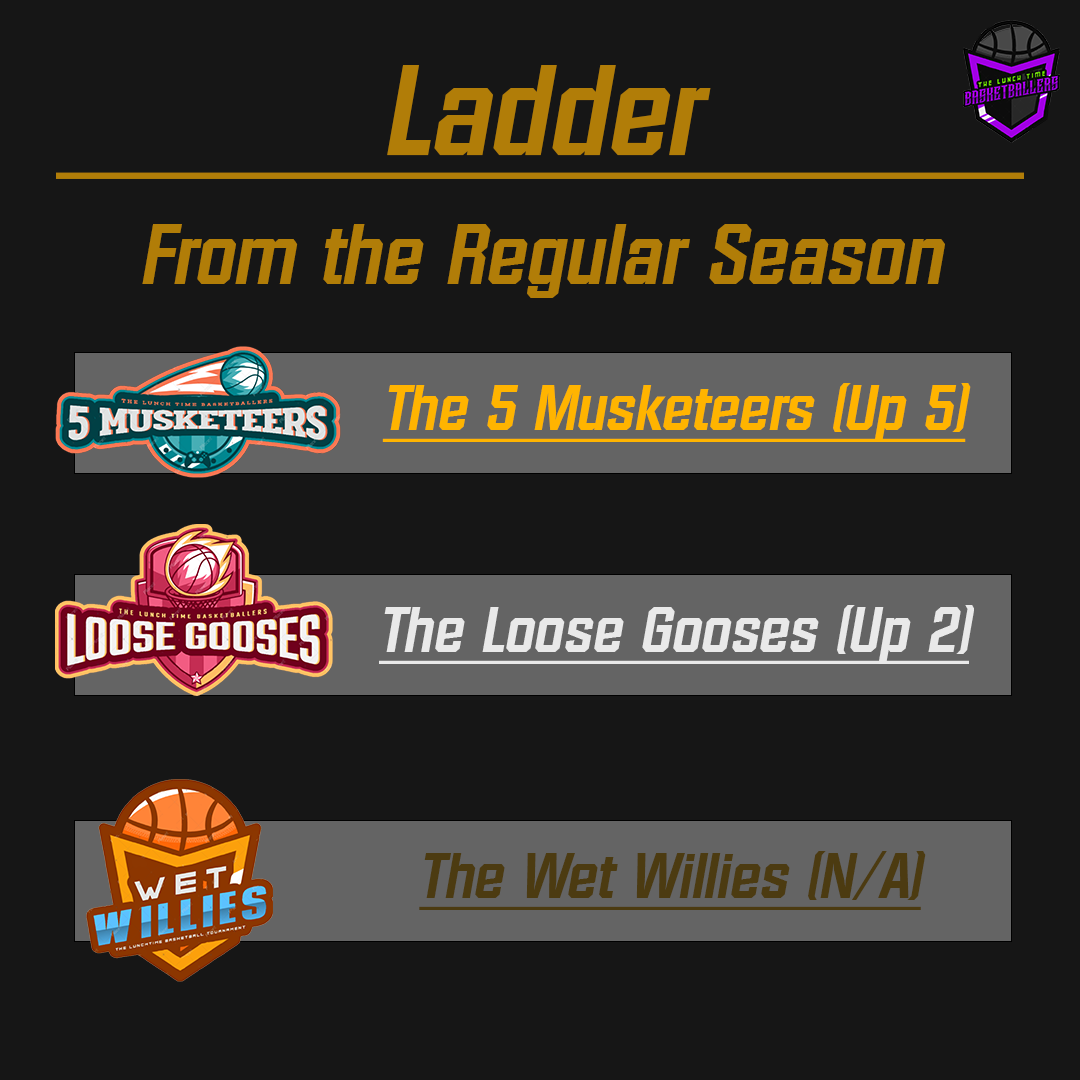
<style>
.page{position:relative;width:1080px;height:1080px;background:#161616}
.page>*{position:absolute;margin:0}
.t1{font:83.3px/129.2px "Diamante-Serial-BoldItalic";color:#b17d08}
.t2{font:125px/129.2px "Diamante-Serial-BoldItalic";color:#b17d08;text-decoration:underline}
.t3{font:62.5px "Diamante-Serial-BoldItalic";color:#ffb400;text-decoration:underline}
.t4{font:62.5px "Diamante-Serial-BoldItalic";color:#e9e9e9;text-decoration:underline}
.t5{font:62.5px "Diamante-Serial-BoldItalic";color:#4c3b11;text-decoration:underline}
</style>
<div class="page">
<p class="t1" style="left:56px;top:65px;width:968px;height:233px;text-align:center"><span class="t2">         Ladder         <br></span>From the Regular Season</p>
<p class="t3" style="left:382px;top:383px;width:589px;height:59px">The 5 Musketeers (Up 5)</p>
<p class="t4" style="left:379px;top:605px;width:595px;height:59px">The Loose Gooses (Up 2)</p>
<p class="t5" style="left:419px;top:851px;width:507px;height:59px">The Wet Willies (N/A)</p>
</div>
